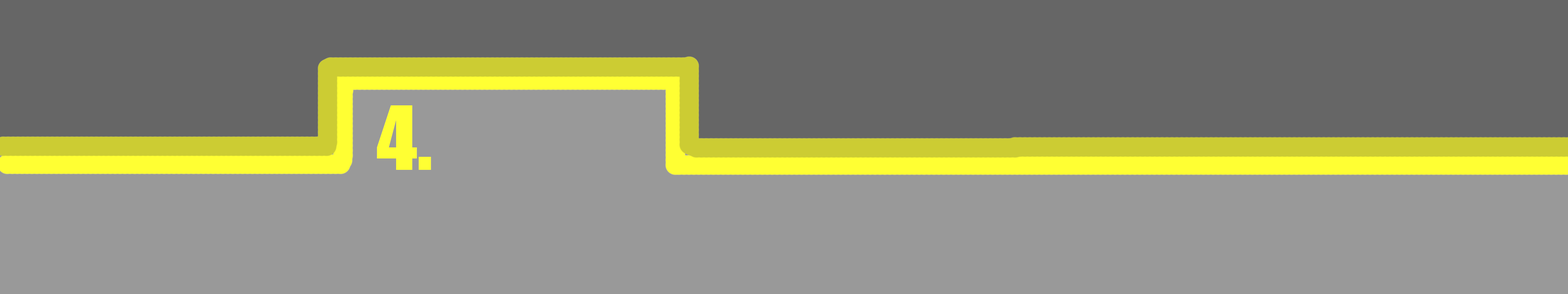
<style>
.page{position:relative;width:1568px;height:294px;background:#999999}
.page>*{position:absolute;margin:0}
.t1{font:81.7px "Impact";color:#ffff33}
</style>
<div class="page">
<p class="t1" style="left:377px;top:105px;width:54px;height:65px">4.</p>
</div>
